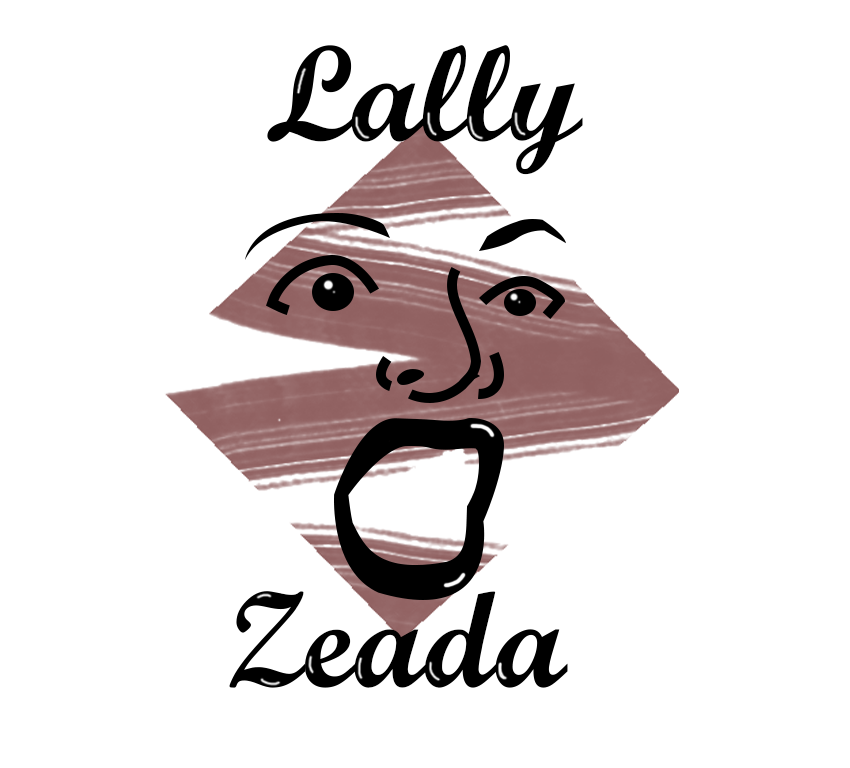
<style>
.page{position:relative;width:850px;height:768px;background:#ffffff}
.page>*{position:absolute;margin:0}
.t1{font:136.1px "ScriptMTBold";color:#000000}
</style>
<div class="page">
<p class="t1" style="left:267px;top:45px;width:316px;height:130px">Lally</p>
<p class="t1" style="left:229px;top:591px;width:339px;height:97px">Zeada</p>
</div>
